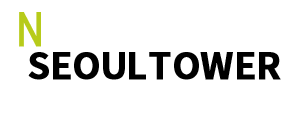
<style>
.page{position:relative;width:300px;height:120px;background:#ffffff}
.page>*{position:absolute;margin:0}
.t1{font:48px "Roboto-Regular";letter-spacing:0.025em;color:#b7cb1a;font-weight:bold;scale:0.8 1}
.t2{font:36px "NotoSansCJKkr-Bold";letter-spacing:0.025em;color:#000000;font-weight:bold}
</style>
<div class="page">
<p class="t1" style="left:19px;top:12px;width:22px;height:35px">N</p>
<p class="t2" style="left:28px;top:52px;width:253px;height:28px">SEOULTOWER</p>
</div>
